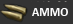
<style>
.page{position:relative;width:73px;height:24px;background:#333333}
.page>*{position:absolute;margin:0}
.t1{font:12px "Calibri-Bold";color:#fefefe}
</style>
<div class="page">
<p class="t1" style="left:32px;top:8px;width:36px;height:8px">AMMO</p>
</div>
